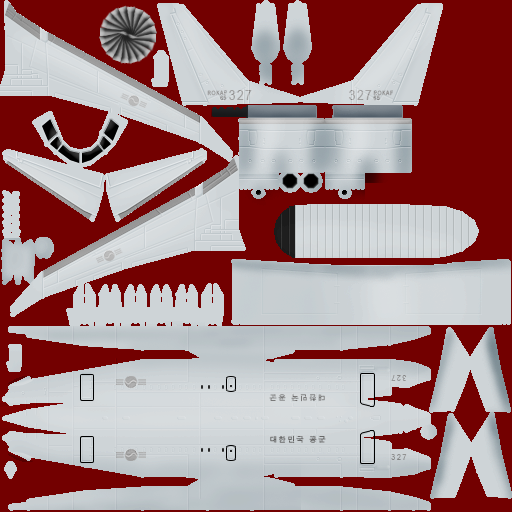
<style>
.page{position:relative;width:512px;height:512px;background:#730000}
.page>*{position:absolute;margin:0}
.t1{font:6px "ArialMT";letter-spacing:0.125em;color:#949494;scale:0.83 1}
.t2{font:14.4px "ArialMT";letter-spacing:0.125em;color:#949494;scale:0.83 1}
.t3{font:8.4px "ArialMT";letter-spacing:0.245em;color:#949494;scale:0.83 1}
.t4{font:7.2px "AppleGothic";letter-spacing:0.245em;color:#666666}
</style>
<div class="page">
<p class="t1" style="left:207px;top:90px;width:20px;height:11px;text-align:center">ROKAF<br>      65</p>
<p class="t2" style="left:229px;top:90px;width:23px;height:10px">327</p>
<p class="t2" style="left:349px;top:90px;width:23px;height:10px">327</p>
<p class="t1" style="left:373px;top:90px;width:20px;height:11px;text-align:center">ROKAF<br>       65</p>
<p class="t3" style="left:391px;top:375px;width:15px;height:6px;rotate:180deg">327</p>
<p class="t4" style="left:269px;top:394px;width:56px;height:8px;rotate:180deg">대한민국 공군</p>
<p class="t4" style="left:270px;top:435px;width:56px;height:8px">대한민국 공군</p>
<p class="t3" style="left:391px;top:454px;width:16px;height:6px">327</p>
</div>
